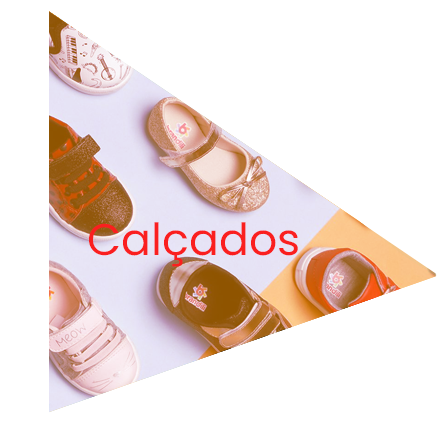
<style>
.page{position:relative;width:442px;height:443px;background:#ffffff}
.page>*{position:absolute;margin:0}
.t1{font:44.2px "Poppins-Regular";color:#fa1f1f}
</style>
<div class="page">
<p class="t1" style="left:89px;top:222px;width:209px;height:45px">Calçados</p>
</div>
